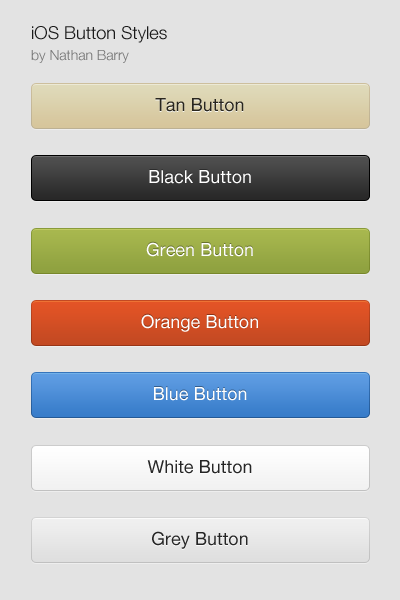
<style>
.page{position:relative;width:400px;height:600px;background:#e3e3e3}
.page>*{position:absolute;margin:0}
.t1{font:18px "HelveticaNeue-Light";color:#1b1b1b}
.t2{font:14px "HelveticaNeue-Light";color:#767676}
.t3{font:18px "HelveticaNeue";color:#28251d}
.t4{font:18px "HelveticaNeue";color:#ffffff}
.t5{font:18px "HelveticaNeue";color:#262626}
</style>
<div class="page">
<p class="t1" style="left:32px;top:26px;width:135px;height:17px">iOS Button Styles</p>
<p class="t2" style="left:31px;top:50px;width:98px;height:13px">by Nathan Barry</p>
<p class="t3" style="left:155px;top:98px;width:89px;height:14px">Tan Button</p>
<p class="t4" style="left:149px;top:170px;width:102px;height:14px">Black Button</p>
<p class="t4" style="left:146px;top:242px;width:107px;height:15px">Green Button</p>
<p class="t4" style="left:141px;top:314px;width:117px;height:18px">Orange Button</p>
<p class="t4" style="left:154px;top:387px;width:93px;height:14px">Blue Button</p>
<p class="t5" style="left:147px;top:460px;width:105px;height:14px">White Button</p>
<p class="t5" style="left:152px;top:531px;width:96px;height:18px">Grey Button</p>
</div>
